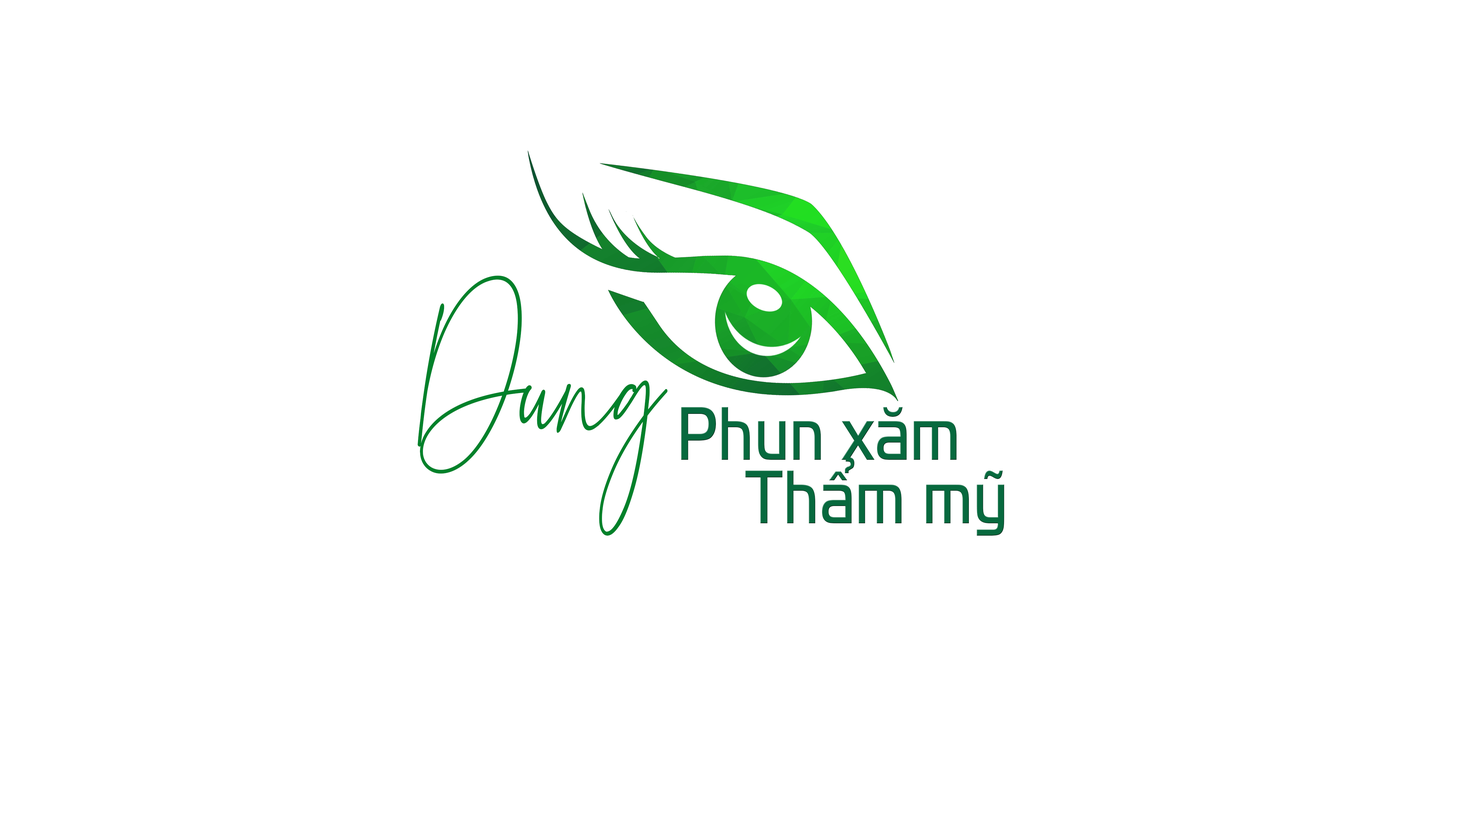
<style>
.page{position:relative;width:1465px;height:814px;background:#ffffff}
.page>*{position:absolute;margin:0}
.t1{font:170.4px "Blancha";color:#00812a;scale:0.83 1}
.t2{font:79px/63.8px "VNI-HandelGothicMedium";color:#00812a;scale:0.82 1}
</style>
<div class="page">
<p class="t1" style="left:418px;top:275px;width:250px;height:261px">Dung</p>
<p class="t2" style="left:681px;top:407px;width:323px;height:129px;text-align:center">Phun xaêm<br>          Thaåm myõ</p>
</div>
